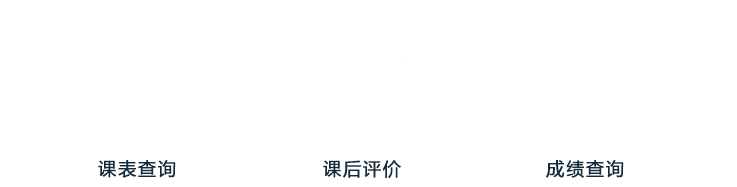
<style>
.page{position:relative;width:737px;height:187px;background:#ffffff}
.page>*{position:absolute;margin:0}
.t1{font:18px "MicrosoftYaHei";letter-spacing:0.08em;color:#122c3d;font-weight:bold}
</style>
<div class="page">
<p class="t1" style="left:98px;top:160px;width:78px;height:18px">课表查询</p>
<p class="t1" style="left:323px;top:160px;width:78px;height:18px">课后评价</p>
<p class="t1" style="left:546px;top:160px;width:78px;height:18px">成绩查询</p>
</div>
